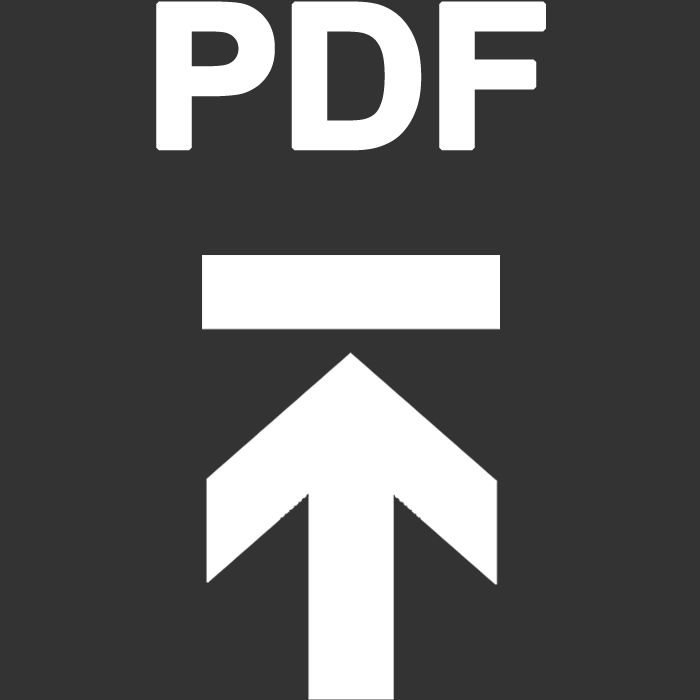
<style>
.page{position:relative;width:700px;height:700px;background:#333333}
.page>*{position:absolute;margin:0}
.t1{font:200px "Arial-BoldMT";letter-spacing:-0.035em;color:#ffffff;font-weight:bold;scale:1.03 1}
</style>
<div class="page">
<p class="t1" style="left:156px;top:1px;width:390px;height:150px">PDF</p>
</div>
